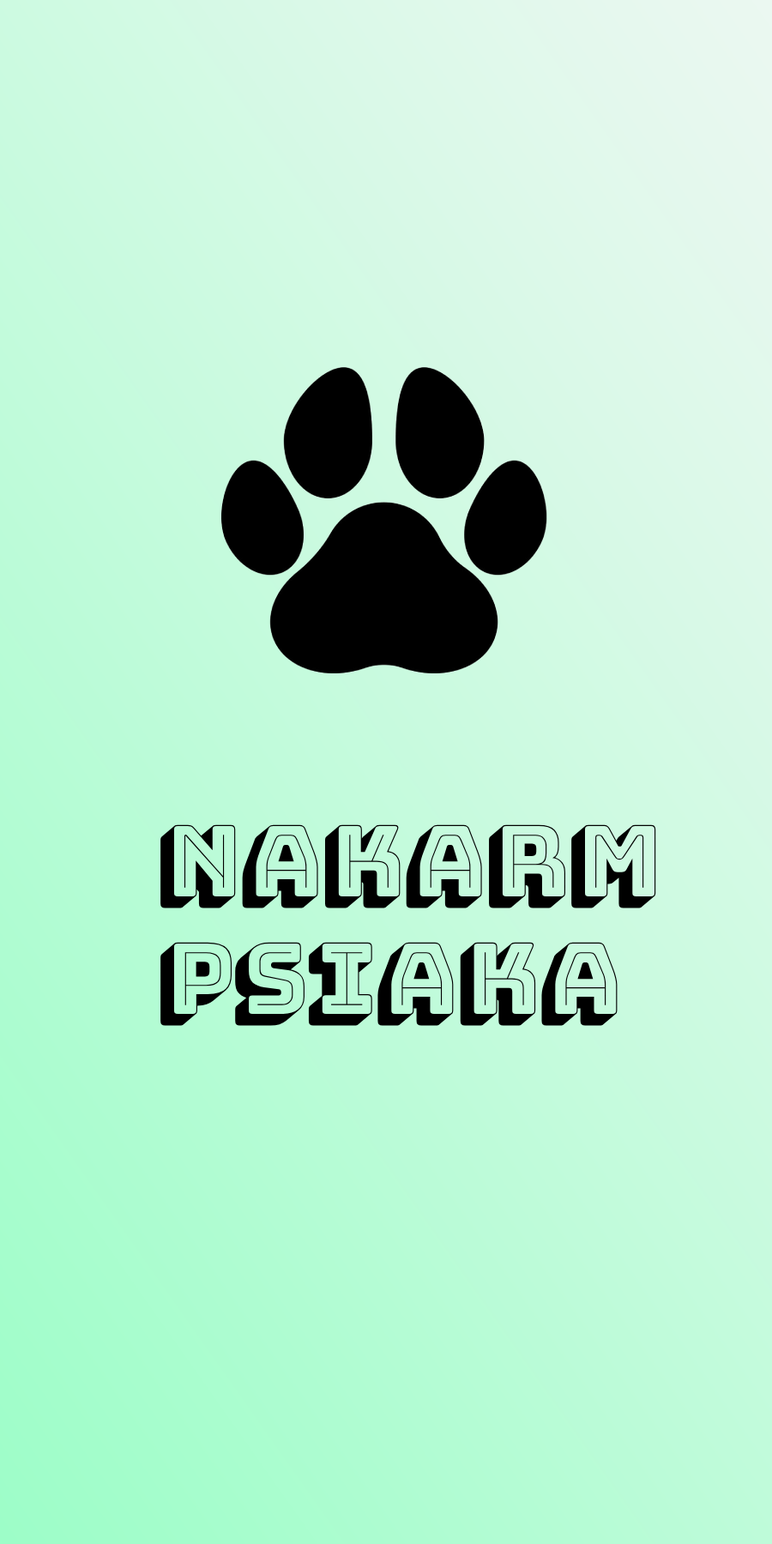
<style>
.page{position:relative;width:772px;height:1544px}
.page>*{position:absolute;margin:0}
.t1{font:97.8px "BungeeShade-Regular";color:#000000}
</style>
<div class="page">
<p class="t1" style="left:160px;top:824px;width:496px;height:202px">Nakarm <br>Psiaka</p>
</div>
